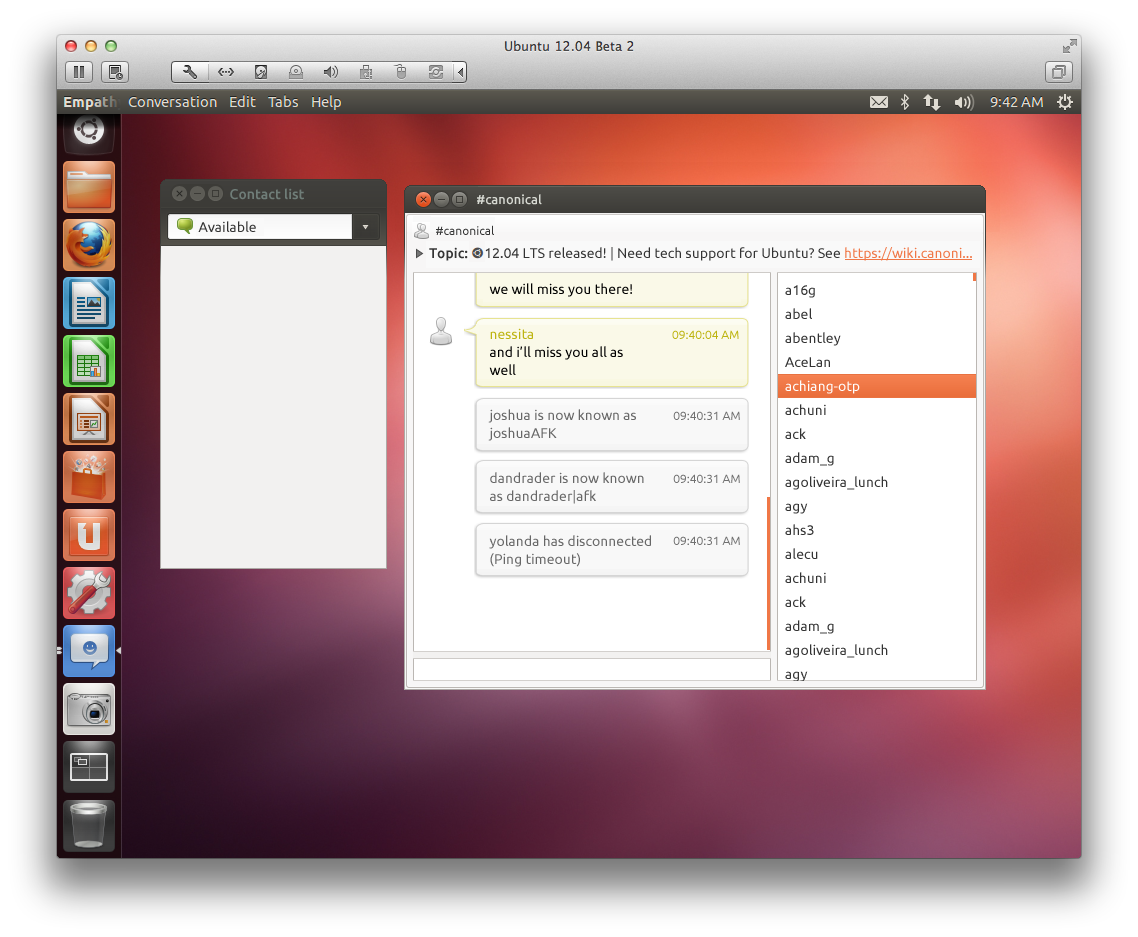
<style>
.page{position:relative;width:1138px;height:937px}
.page>*{position:absolute;margin:0}
.t1{font:14px "Ubuntu-Medium";color:#6f7d78}
.t2{font:13px "Ubuntu-Medium";color:#d7d9d2}
.t3{font:14px "Ubuntu";color:#333333}
.t4{font:12px "Ubuntu";color:#333333}
.t5{font:14px "Ubuntu-Medium";color:#333333}
.t6{font:14px "Ubuntu";color:#f07746}
.t7{font:14px/18px "Ubuntu";color:#676767}
.t8{font:14px/18px "Ubuntu";color:#000000}
.t9{font:14px/45px "Ubuntu";color:#bdb410}
.t10{font:14px/18px "Ubuntu";color:#bdb410}
.t11{font:14px/45px "Ubuntu";color:#676767}
.t12{font:14px/24px "Ubuntu";color:#333333}
.t13{font:14px/24px "Ubuntu";color:#ffffff}
.t14{font:12px "Ubuntu";color:#bdb410}
.t15{font:12px "Ubuntu";color:#717171}
</style>
<div class="page">
<p class="t1" style="left:230px;top:188px;width:74px;height:12px">Contact list</p>
<p class="t2" style="left:477px;top:194px;width:65px;height:11px">#canonical</p>
<p class="t3" style="left:198px;top:221px;width:58px;height:11px">Available</p>
<p class="t4" style="left:436px;top:225px;width:58px;height:10px">#canonical</p>
<p class="t3" style="left:429px;top:247px;width:543px;height:14px"><span class="t5">Topic:</span>     12.04 LTS released! | Need tech support for Ubuntu? See <span class="t6">https://wiki.canoni...</span></p>
<p class="t7" style="left:488px;top:283px;width:163px;height:284px"><span class="t8">we will miss you there!<br></span><span class="t9">n</span><span class="t10">essita<br></span><span class="t8">and i’ll miss you all as <br>well<br></span><span class="t11">j</span>oshua is now known as<br>joshuaAFK<span class="t11"><br>d</span>andrader is now known<br>as dandrader|afk<span class="t11"><br>y</span>olanda has disconnected<br>(Ping timeout)</p>
<p class="t12" style="left:785px;top:285px;width:103px;height:442px">a16g<br>abel<br>abentley<br>AceLan<br><span class="t13">achiang-otp<br></span>achuni<br>ack<br>adam_g<br>agoliveira_lunch<br>agy<br>ahs3<br>alecu<br>achuni<br>ack<br>adam_g<br>agoliveira_lunch<br>agy<br>ahs3<br>alecu</p>
<p class="t14" style="left:672px;top:330px;width:67px;height:9px">09:40:04 AM</p>
<p class="t15" style="left:673px;top:411px;width:67px;height:9px">09:40:31 AM</p>
<p class="t15" style="left:673px;top:474px;width:67px;height:9px">09:40:31 AM</p>
<p class="t15" style="left:673px;top:536px;width:67px;height:9px">09:40:31 AM</p>
</div>
